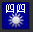
<style>
.page{position:relative;width:33px;height:32px;background:#000090}
.page>*{position:absolute;margin:0}
.t1{font:10.4px "SimSun";color:#ffffff}
</style>
<div class="page">
<p class="t1" style="left:6px;top:4px;width:19px;height:9px">四四</p>
</div>
